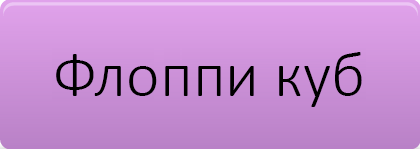
<style>
.page{position:relative;width:420px;height:149px}
.page>*{position:absolute;margin:0}
.t1{font:64px "Calibri-Light";color:#000000}
</style>
<div class="page">
<p class="t1" style="left:56px;top:52px;width:306px;height:55px">Флоппи куб</p>
</div>
